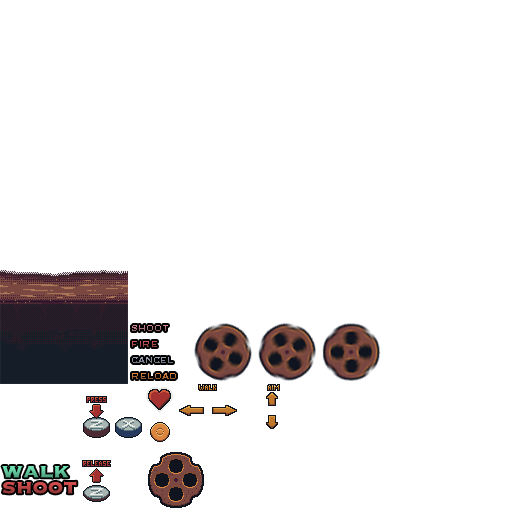
<style>
.page{position:relative;width:512px;height:512px;background:#ffffff}
.page>*{position:absolute;margin:0}
.t1{font:12.5px "Copperplate"}
.t2{font:25px "Copperplate-Bold"}
</style>
<div class="page">
<p class="t1" style="left:132px;top:325px;width:36px;height:6px">shoot</p>
<p class="t1" style="left:132px;top:341px;width:25px;height:6px">fire</p>
<p class="t1" style="left:132px;top:357px;width:41px;height:6px">cancel</p>
<p class="t1" style="left:132px;top:373px;width:44px;height:6px">reload</p>
<p class="t2" style="left:2px;top:466px;width:67px;height:12px">walk</p>
<p class="t2" style="left:2px;top:481px;width:75px;height:13px">shoot</p>
</div>
